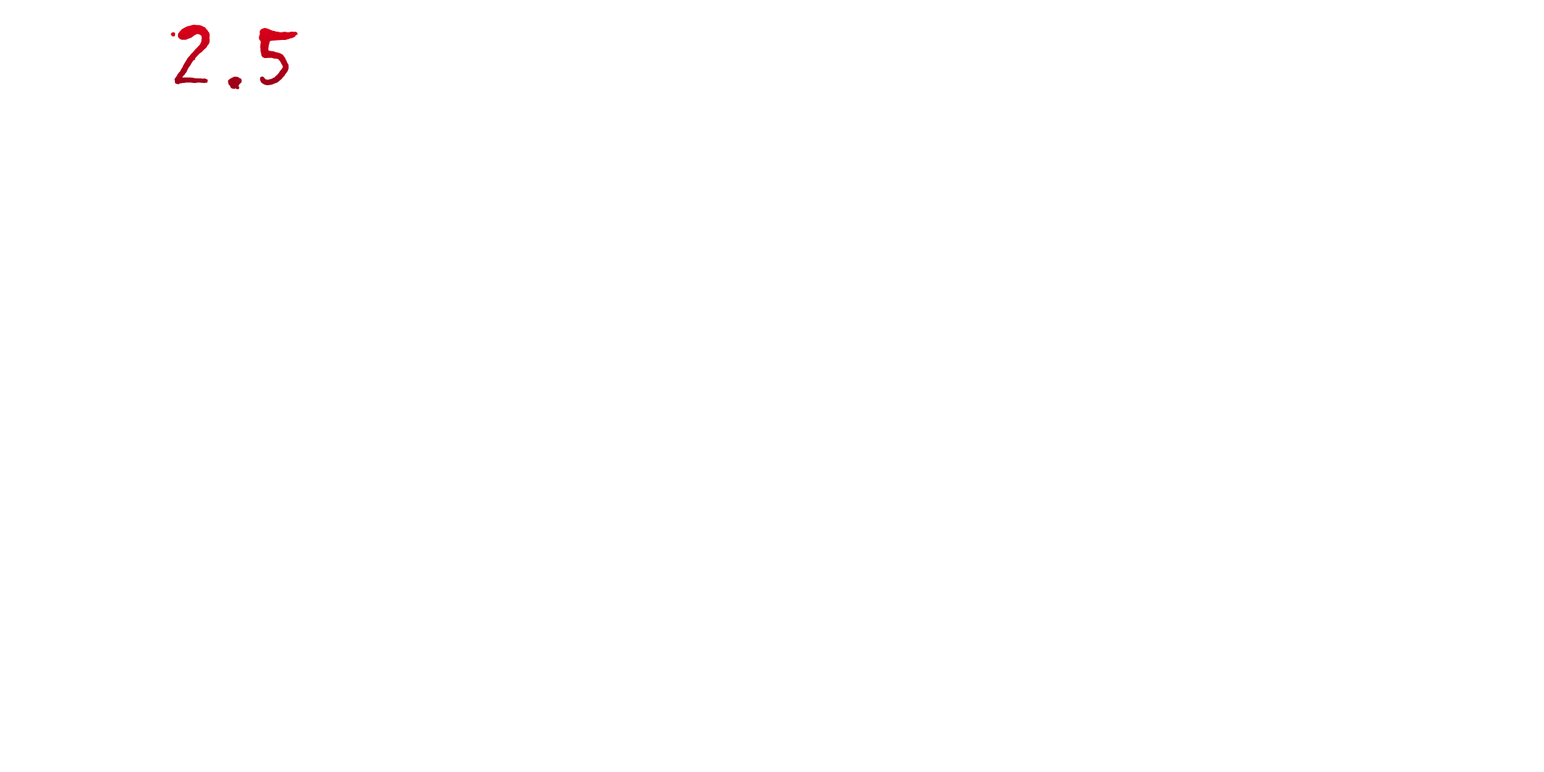
<style>
.page{position:relative;width:1544px;height:772px;background:#ffffff}
.page>*{position:absolute;margin:0}
.t1{font:90.5px "Chiller-Regular";letter-spacing:0.1em;font-variant:small-caps;font-weight:bold}
</style>
<div class="page">
<p class="t1" style="left:170px;top:24px;width:128px;height:66px">2.5</p>
</div>
